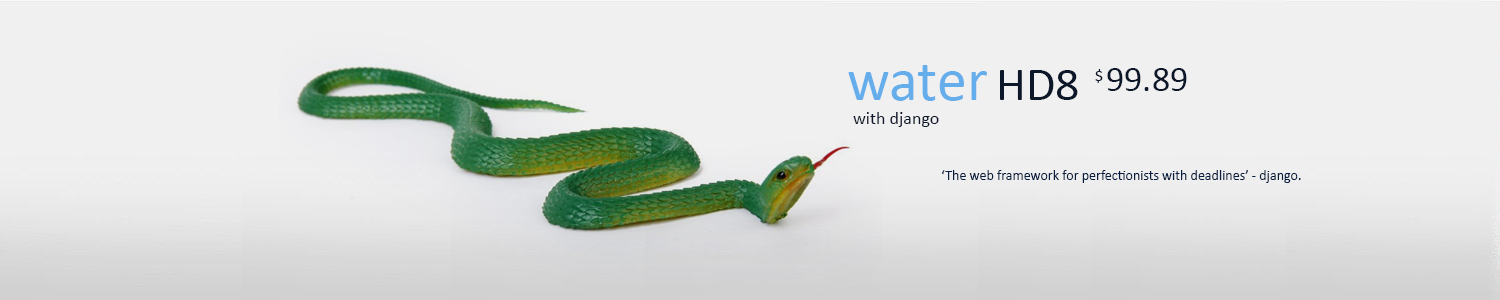
<style>
.page{position:relative;width:1500px;height:300px;background:#f0f0f0}
.page>*{position:absolute;margin:0}
.t1{font:60px "Calibri";color:#66aeeb}
.t2{font:48px "Calibri";color:#0c1729}
.t3{font:16px "Calibri";color:#0c1729}
.t4{font:36px "Calibri";color:#0c1729}
.t5{font:18px "Calibri";color:#0c1729}
.t6{font:14px "Calibri";color:#0c1729}
</style>
<div class="page">
<p class="t1" style="left:848px;top:65px;width:139px;height:36px">water</p>
<p class="t2" style="left:1000px;top:70px;width:78px;height:30px">HD8</p>
<p class="t3" style="left:1095px;top:69px;width:8px;height:14px">$</p>
<p class="t4" style="left:1107px;top:68px;width:80px;height:23px">99.89</p>
<p class="t5" style="left:853px;top:112px;width:86px;height:15px">with django</p>
<p class="t6" style="left:942px;top:170px;width:359px;height:13px">‘The web framework for perfectionists with deadlines’ - django.</p>
</div>
